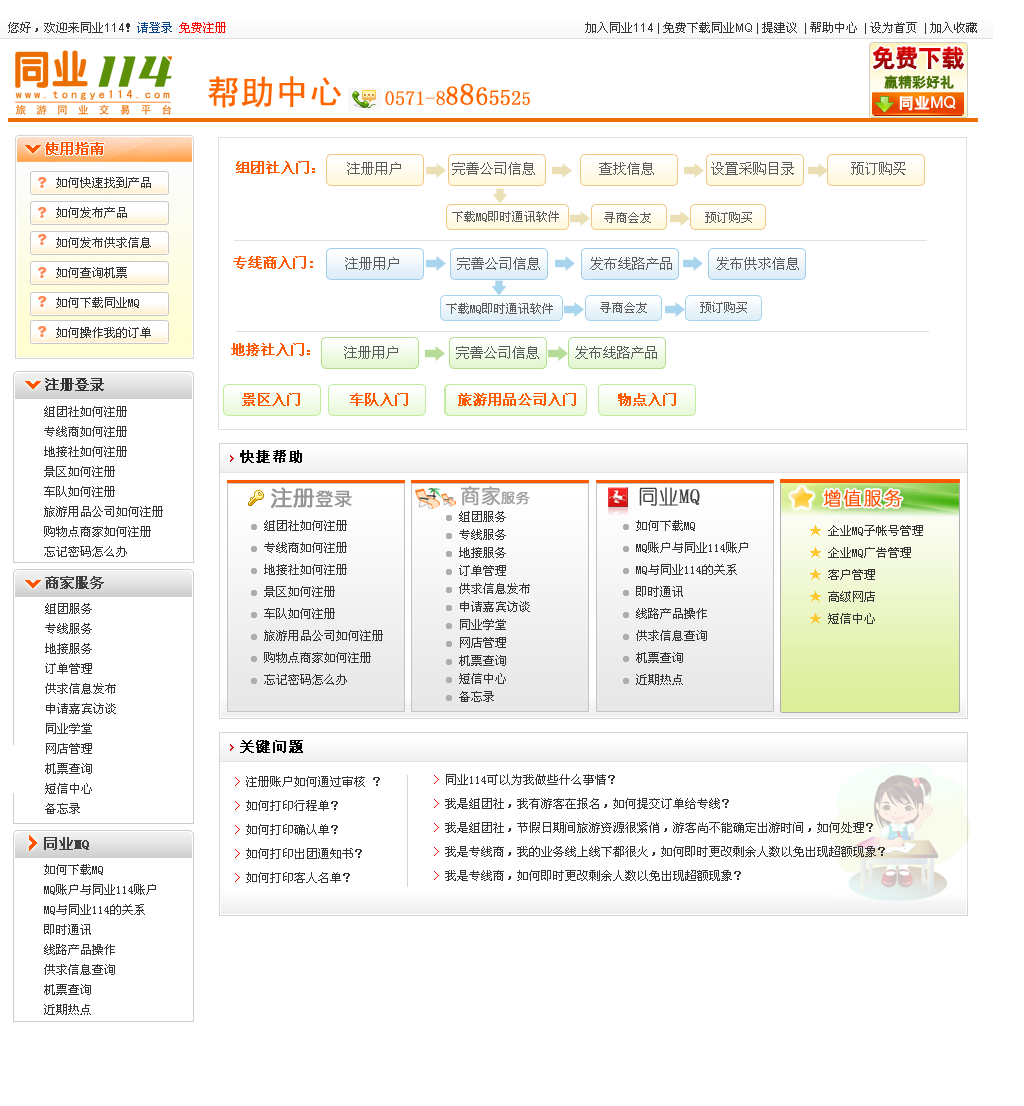
<style>
.page{position:relative;width:1024px;height:1106px;background:#ffffff}
.page>*{position:absolute;margin:0}
.t1{font:34.1px "SimHei";color:#ff6600}
.t2{font:19.4px "YouYuan";color:#ff6600;font-weight:bold}
.t3{font:26px "YouYuan";color:#ff6600;font-weight:bold}
.t4{font:29.9px "YouYuan";color:#ff6600;font-weight:bold}
.t5{font:25px "YouYuan";color:#ff6600;font-weight:bold}
.t6{font:21.1px "YouYuan";color:#ff6600;font-weight:bold}
.t7{font:21.8px "YouYuan";color:#ff6600;font-weight:bold}
.t8{font:20px "YouYuan";color:#ff6600;font-weight:bold}
.t9{font:18px "YouYuan";color:#ff6600;font-weight:bold}
.t10{font:14px "NSimSun";color:#ff5400;font-weight:bold}
.t11{font:14px "NSimSun";color:#ff5a00;font-weight:bold}
.t12{font:14px "NSimSun";color:#5a5a5a}
.t13{font:15px "FZHPJW--GB1-0";color:#ff8a57}
.t14{font:12px/30px "NSimSun";color:#333333}
.t15{font:12px "NSimSun";color:#5a5a5a}
.t16{font:14px "NSimSun";color:#333333;font-weight:bold}
.t17{font:12px/20px "NSimSun";color:#333333}
.t18{font:14px "NSimSun";letter-spacing:0.1em;color:#000000;font-weight:bold}
.t19{font:20px "¾­µäÖÐÔ²¼ò-regular";color:#a2a2a2;font-weight:bold}
.t20{font:14px "¾­µäÖÐÔ²¼ò-regular";color:#a2a2a2;font-weight:bold}
.t21{font:22px "¾­µäÖÐÔ²¼ò-regular";color:#949494;font-weight:bold}
.t22{font:18px "¾­µäÖÐÔ²¼ò-regular";color:#949494;font-weight:bold}
.t23{font:20px "YouYuan";color:#404040;font-weight:bold}
.t24{font:18px "YouYuan";letter-spacing:0.1em;color:#ff5000;font-weight:bold}
.t25{font:12px/22px "NSimSun";color:#333333}
.t26{font:8px/22px "NSimSun";color:#adadad}
.t27{font:12px/18px "NSimSun";color:#333333}
.t28{font:8px/18px "NSimSun";color:#adadad}
.t29{font:12px/22px "NSimSun";color:#fdc72d}
.t30{font:14px "NSimSun";color:#404040;font-weight:bold}
.t31{font:12px/24px "NSimSun";color:#333333}
.t32{font:12px/24px "NSimSun";color:#ff0000}
</style>
<div class="page">
<p class="t1" style="left:208px;top:76px;width:133px;height:32px">帮助中心</p>
<p class="t2" style="left:385px;top:83px;width:145px;height:22px">0571-8<span class="t3">8</span><span class="t4">8</span><span class="t5">6</span><span class="t6">5</span><span class="t7">5</span><span class="t8">2</span><span class="t9">5</span></p>
<p class="t10" style="left:45px;top:142px;width:59px;height:13px">使用指南</p>
<p class="t11" style="left:236px;top:161px;width:79px;height:13px">组团社入门：</p>
<p class="t12" style="left:347px;top:162px;width:559px;height:13px">注册用户       完善公司信息         查找信息        设置采购目录        预订购买</p>
<p class="t13" style="left:38px;top:177px;width:9px;height:11px">?</p>
<p class="t14" style="left:56px;top:177px;width:95px;height:161px">如何快速找到产品<br>如何发布产品<br>如何发布供求信息<br>如何查询机票<br>如何下载同业MQ<br>如何操作我的订单</p>
<p class="t13" style="left:38px;top:207px;width:9px;height:11px">?</p>
<p class="t15" style="left:452px;top:211px;width:107px;height:11px">下载MQ即时通讯软件</p>
<p class="t15" style="left:604px;top:212px;width:47px;height:11px">寻商会友</p>
<p class="t15" style="left:705px;top:212px;width:47px;height:11px">预订购买</p>
<p class="t13" style="left:38px;top:234px;width:9px;height:11px">?</p>
<p class="t11" style="left:233px;top:256px;width:80px;height:13px">专线商入门:</p>
<p class="t12" style="left:345px;top:257px;width:454px;height:13px">注册用户        完善公司信息       发布线路产品      发布供求信息</p>
<p class="t13" style="left:38px;top:267px;width:9px;height:11px">?</p>
<p class="t13" style="left:38px;top:296px;width:9px;height:11px">?</p>
<p class="t15" style="left:446px;top:303px;width:107px;height:11px">下载MQ即时通讯软件</p>
<p class="t15" style="left:600px;top:302px;width:47px;height:11px">寻商会友</p>
<p class="t15" style="left:700px;top:302px;width:47px;height:11px">预订购买</p>
<p class="t13" style="left:38px;top:326px;width:9px;height:11px">?</p>
<p class="t11" style="left:231px;top:343px;width:79px;height:13px">地接社入门：</p>
<p class="t12" style="left:344px;top:346px;width:313px;height:13px">注册用户        完善公司信息     发布线路产品</p>
<p class="t16" style="left:45px;top:378px;width:59px;height:13px">注册登录</p>
<p class="t11" style="left:242px;top:393px;width:434px;height:13px">景区入门      车队入门      旅游用品公司入门     物点入门</p>
<p class="t17" style="left:44px;top:406px;width:119px;height:151px">组团社如何注册<br>专线商如何注册<br>地接社如何注册<br>景区如何注册<br>车队如何注册<br>旅游用品公司如何注册 <br>购物点商家如何注册<br>忘记密码怎么办</p>
<p class="t18" style="left:240px;top:450px;width:62px;height:13px">快捷帮助</p>
<p class="t19" style="left:461px;top:486px;width:69px;height:20px">商家<span class="t20">服务</span></p>
<p class="t21" style="left:271px;top:487px;width:81px;height:21px">注册<span class="t22">登录</span></p>
<p class="t23" style="left:639px;top:487px;width:61px;height:19px">同业MQ</p>
<p class="t24" style="left:823px;top:489px;width:79px;height:18px">增值服务</p>
<p class="t25" style="left:251px;top:520px;width:132px;height:165px"><span class="t26">● </span>组团社如何注册<br><span class="t26">● </span>专线商如何注册<br><span class="t26">● </span>地接社如何注册<br><span class="t26">● </span>景区如何注册<br><span class="t26">● </span>车队如何注册<br><span class="t26">● </span>旅游用品公司如何注册 <br><span class="t26">● </span>购物点商家如何注册<br><span class="t26">● </span>忘记密码怎么办</p>
<p class="t27" style="left:446px;top:511px;width:84px;height:191px"><span class="t28">● </span>组团服务<br><span class="t28">● </span>专线服务<br><span class="t28">● </span>地接服务<br><span class="t28">● </span>订单管理<br><span class="t28">● </span>供求信息发布<br><span class="t28">● </span>申请嘉宾访谈<br><span class="t28">● </span>同业学堂<br><span class="t28">● </span>网店管理<br><span class="t28">● </span>机票查询<br><span class="t28">● </span>短信中心<br><span class="t28">● </span>备忘录</p>
<p class="t25" style="left:623px;top:520px;width:125px;height:165px"><span class="t26">● </span>如何下载MQ<br><span class="t26">● </span>MQ账户与同业114账户<br><span class="t26">● </span>MQ与同业114的关系<br><span class="t26">● </span>即时通讯<br><span class="t26">● </span>线路产品操作<br><span class="t26">● </span>供求信息查询<br><span class="t26">● </span>机票查询<br><span class="t26">● </span>近期热点</p>
<p class="t25" style="left:810px;top:525px;width:113px;height:99px"><span class="t29">★</span> 企业MQ子帐号管理<br><span class="t29">★</span> 企业MQ广告管理<br><span class="t29">★</span> 客户管理<br><span class="t29">★</span> 高级网店<br><span class="t29">★</span> 短信中心</p>
<p class="t30" style="left:45px;top:576px;width:59px;height:13px">商家服务</p>
<p class="t17" style="left:45px;top:603px;width:71px;height:211px">组团服务<br>专线服务<br>地接服务<br>订单管理<br>供求信息发布<br>申请嘉宾访谈<br>同业学堂<br>网店管理<br>机票查询<br>短信中心<br>备忘录</p>
<p class="t18" style="left:240px;top:740px;width:63px;height:13px">关键问题</p>
<p class="t31" style="left:434px;top:774px;width:451px;height:107px"><span class="t32">&gt;</span> 同业114可以为我做些什么事情？<br><span class="t32">&gt;</span> 我是组团社，我有游客在报名，如何提交订单给专线？         <br><span class="t32">&gt;</span> 我是组团社，节假日期间旅游资源很紧俏，游客尚不能确定出游时间，如何处理？<br><span class="t32">&gt;</span> 我是专线商，我的业务线上线下都很火，如何即时更改剩余人数以免出现超额现象？<br><span class="t32">&gt;</span> 我是专线商，如何即时更改剩余人数以免出现超额现象？</p>
<p class="t31" style="left:235px;top:776px;width:145px;height:107px"><span class="t32">&gt;</span> 注册账户如何通过审核 ？                        <br><span class="t32">&gt;</span> 如何打印行程单？<br><span class="t32">&gt;</span> 如何打印确认单？<br><span class="t32">&gt;</span> 如何打印出团通知书？<br><span class="t32">&gt;</span> 如何打印客人名单？</p>
<p class="t30" style="left:44px;top:837px;width:45px;height:13px">同业MQ</p>
<p class="t17" style="left:44px;top:864px;width:112px;height:151px">如何下载MQ<br>MQ账户与同业114账户<br>MQ与同业114的关系<br>即时通讯<br>线路产品操作<br>供求信息查询<br>机票查询<br>近期热点</p>
</div>
